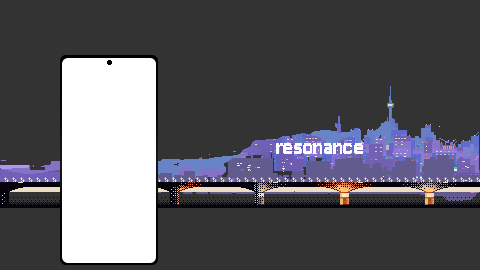
<style>
.page{position:relative;width:480px;height:270px;background:#333333}
.page>*{position:absolute;margin:0}
.t1{font:16px "Galmuri11-Bold";color:#fdfdfd}
</style>
<div class="page">
<p class="t1" style="left:276px;top:143px;width:87px;height:11px">resonance</p>
</div>
